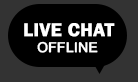
<style>
.page{position:relative;width:138px;height:82px;background:#000000}
.page>*{position:absolute;margin:0}
.t1{font:19.3px "FranklinGothic-Demi";color:#ffffff;font-weight:bold}
.t2{font:13.9px "MicrosoftSansSerif";color:#ffffff;font-weight:bold}
</style>
<div class="page">
<p class="t1" style="left:24px;top:23px;width:91px;height:14px">LIVE CHAT</p>
<p class="t2" style="left:37px;top:41px;width:61px;height:12px">OFFLINE</p>
</div>
